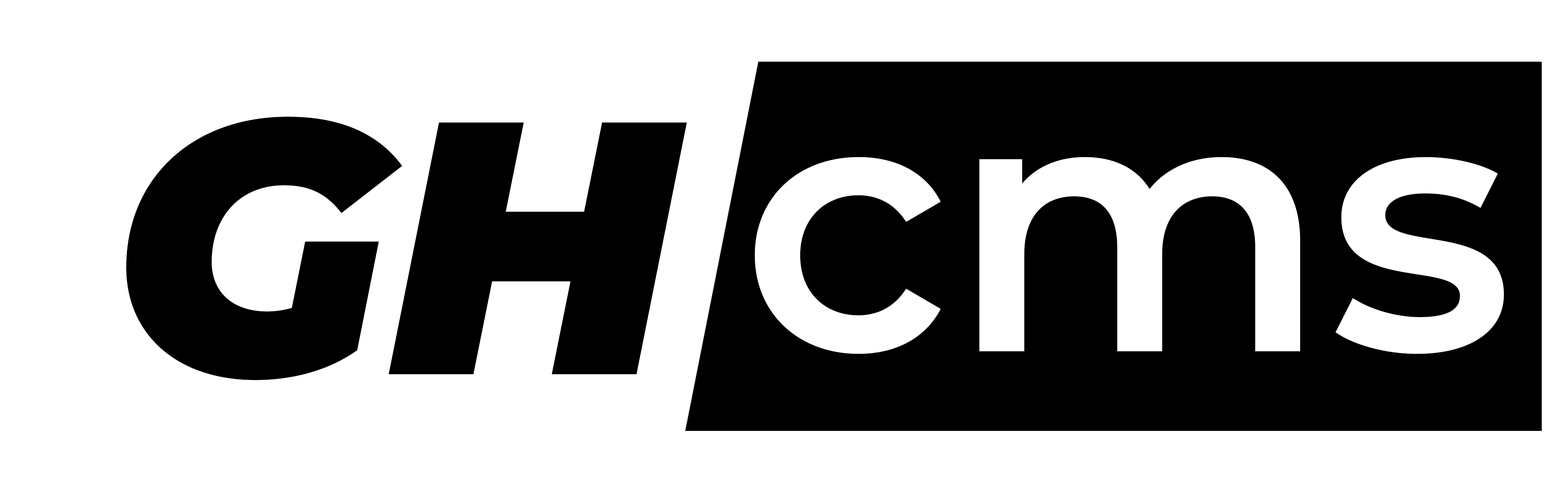
<style>
.page{position:relative;width:1568px;height:503px;background:#ffffff}
.page>*{position:absolute;margin:0}
.t1{font:359.3px "Montserrat-BlackItalic";color:#000000}
.t2{font:359.3px "Montserrat-SemiBold";color:#ffffff}
</style>
<div class="page">
<p class="t1" style="left:126px;top:117px;width:561px;height:263px">GH</p>
<p class="t2" style="left:755px;top:157px;width:749px;height:197px">cms</p>
</div>
